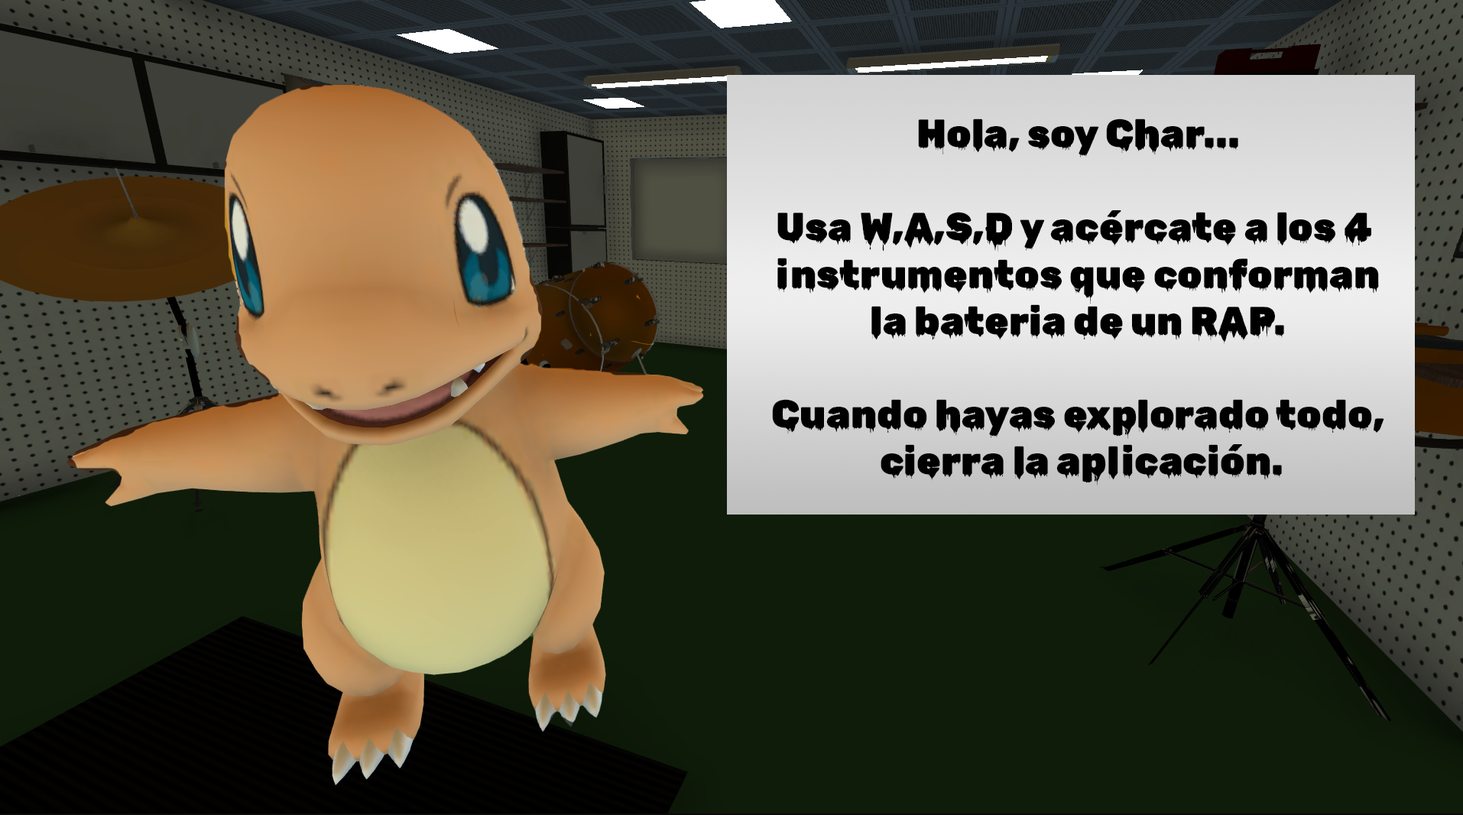
<style>
.page{position:relative;width:1463px;height:815px;background:#0f1c09}
.page>*{position:absolute;margin:0}
.t1{font:39px "RubikWetPaint-Regular";color:#000000}
</style>
<div class="page">
<p class="t1" style="left:772px;top:118px;width:612px;height:367px;text-align:center">Hola, soy Char...<br><br>Usa W,A,S,D y acércate a los 4 <br>instrumentos que conforman<br>la bateria de un RAP.<br><br>Cuando hayas explorado todo,<br> cierra la aplicación.</p>
</div>
